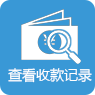
<style>
.page{position:relative;width:95px;height:95px;background:#3998d6}
.page>*{position:absolute;margin:0}
.t1{font:14px "MicrosoftYaHei";color:#ffffff}
</style>
<div class="page">
<p class="t1" style="left:8px;top:68px;width:84px;height:15px">查看收款记录</p>
</div>
